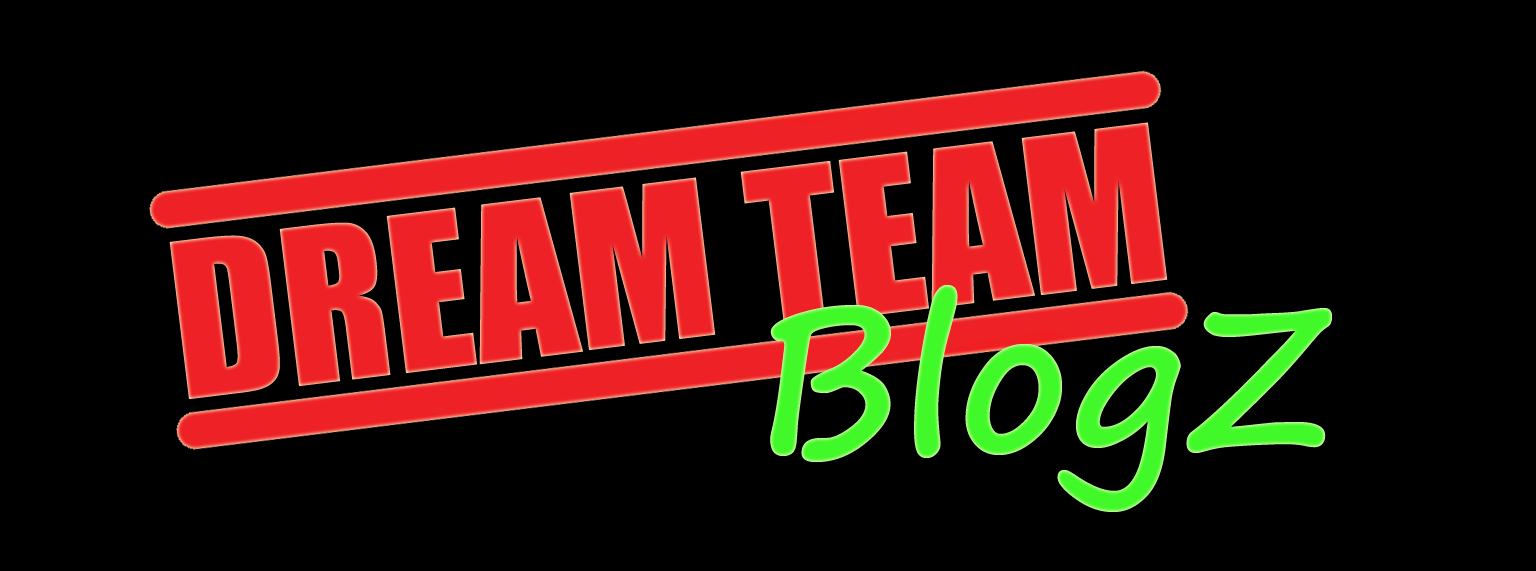
<style>
.page{position:relative;width:1536px;height:571px;background:#000000}
.page>*{position:absolute;margin:0}
.t1{font:200px "Impact";color:#ee2226}
.t2{font:200px "SegoePrint-Bold";color:#41f829}
</style>
<div class="page">
<p class="t1" style="left:169px;top:122px;width:999px;height:277px;rotate:-7deg">DREAM TEAM</p>
<p class="t2" style="left:770px;top:284px;width:562px;height:228px">BlogZ</p>
</div>
